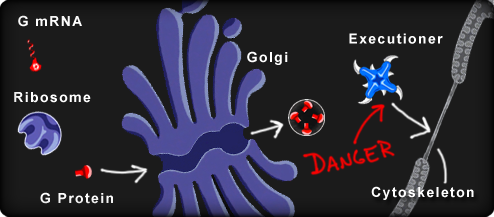
<style>
.page{position:relative;width:494px;height:217px;background:#1b1b1b}
.page>*{position:absolute;margin:0}
.t1{font:14px "Arial-BoldMT";letter-spacing:0.1em;color:#ffffff}
</style>
<div class="page">
<p class="t1" style="left:18px;top:15px;width:64px;height:12px">G mRNA</p>
<p class="t1" style="left:349px;top:33px;width:94px;height:11px">Executioner</p>
<p class="t1" style="left:247px;top:51px;width:41px;height:14px">Golgi</p>
<p class="t1" style="left:14px;top:92px;width:77px;height:11px">Ribosome</p>
<p class="t1" style="left:40px;top:192px;width:73px;height:12px">G Protein</p>
<p class="t1" style="left:371px;top:186px;width:103px;height:14px">Cytoskeleton</p>
</div>
